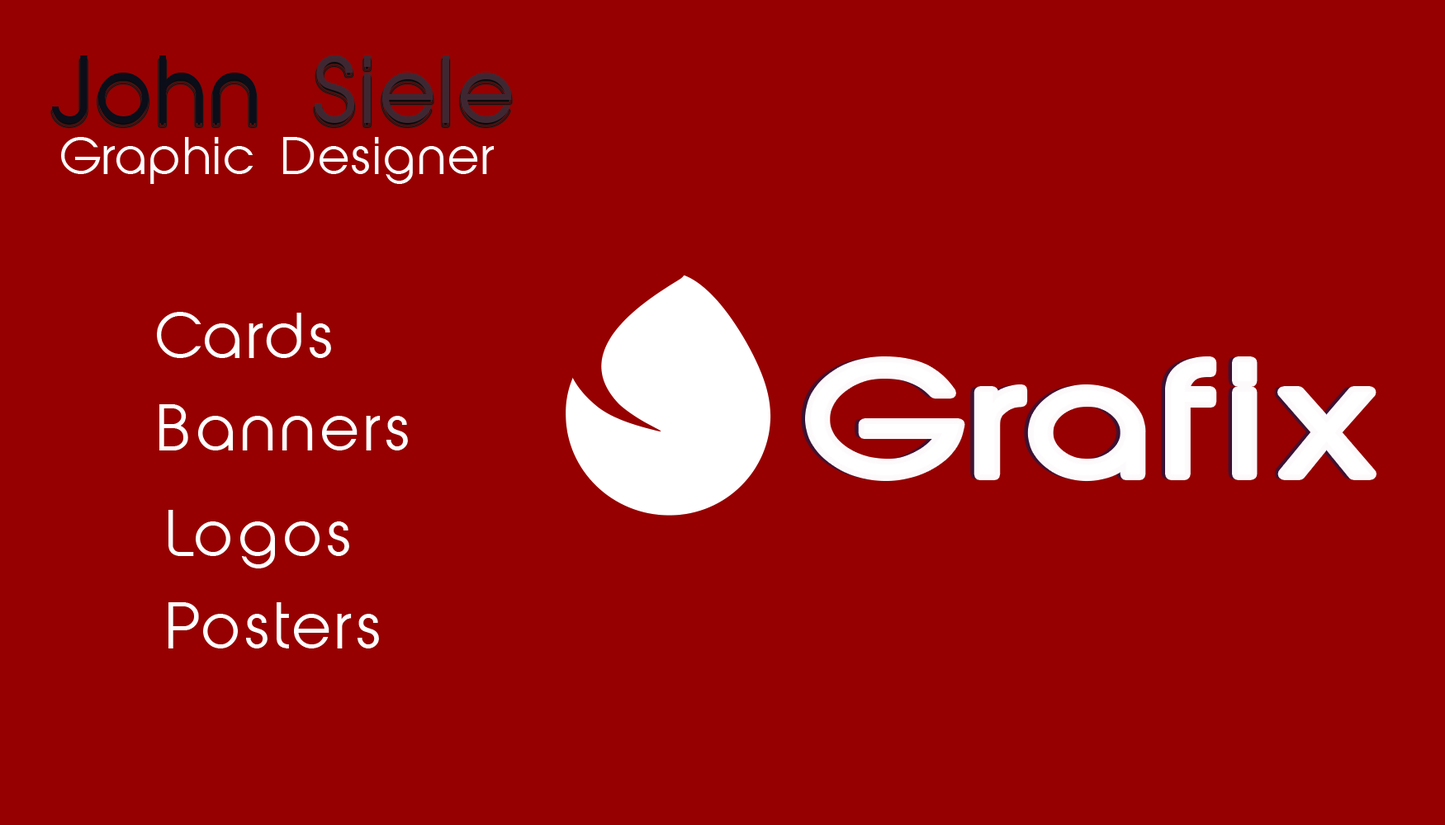
<style>
.page{position:relative;width:1445px;height:825px;background:#960000}
.page>*{position:absolute;margin:0}
.t1{font:85.8px "AbeatbyKai";letter-spacing:0.05em;color:#3f2732}
.t2{font:85.8px "AbeatbyKai";letter-spacing:0.05em;color:#0b0d18}
.t3{font:47.7px "AbeatbyKai";letter-spacing:0.05em;color:#fefdfe}
.t4{font:59.2px "AbeatbyKai";letter-spacing:0.09em;color:#ffffff}
.t5{font:144.5px "AbeatbyKai";letter-spacing:0.09em;color:#ffffff;scale:1.25 1}
</style>
<div class="page">
<p class="t1" style="left:52px;top:55px;width:460px;height:68px"><span class="t2">John </span>Siele</p>
<p class="t3" style="left:61px;top:137px;width:433px;height:47px">Graphic Designer</p>
<p class="t4" style="left:157px;top:312px;width:174px;height:46px">Cards</p>
<p class="t5" style="left:811px;top:362px;width:560px;height:114px">Grafix</p>
<p class="t4" style="left:159px;top:404px;width:249px;height:47px">Banners</p>
<p class="t4" style="left:168px;top:510px;width:181px;height:59px">Logos</p>
<p class="t4" style="left:168px;top:603px;width:211px;height:46px">Posters</p>
</div>
